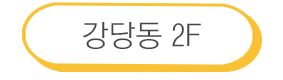
<style>
.page{position:relative;width:283px;height:80px;background:#ffffff}
.page>*{position:absolute;margin:0}
.t1{font:30px "YGO520";color:#464646}
</style>
<div class="page">
<p class="t1" style="left:83px;top:21px;width:118px;height:29px">강당동 2F</p>
</div>
